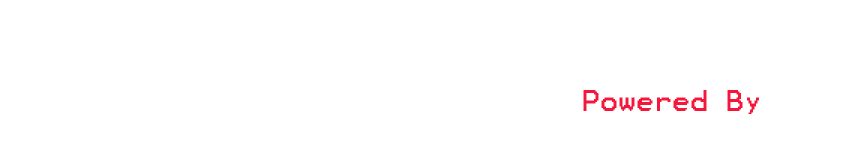
<style>
.page{position:relative;width:849px;height:145px;background:#ffffff}
.page>*{position:absolute;margin:0}
.t1{font:24px "Terminal";color:#f4173b}
</style>
<div class="page">
<p class="t1" style="left:583px;top:90px;width:176px;height:24px">Powered By</p>
</div>
